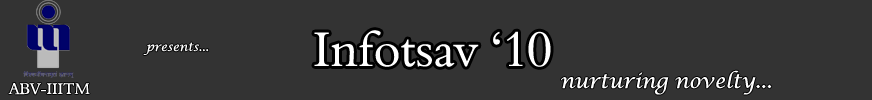
<style>
.page{position:relative;width:872px;height:100px;background:#333333}
.page>*{position:absolute;margin:0}
.t1{font:50px "00243";color:#ffffff}
.t2{font:12px "LucidaCalligraphy-Italic";color:#ffffff}
.t3{font:20px "LucidaCalligraphy-Italic";color:#ffffff}
</style>
<div class="page">
<p class="t1" style="left:314px;top:30px;width:237px;height:37px">Infotsav ‘10</p>
<p class="t2" style="left:143px;top:42px;width:66px;height:13px">presents...</p>
<p class="t3" style="left:561px;top:70px;width:211px;height:25px">nurturing novelty...</p>
</div>
